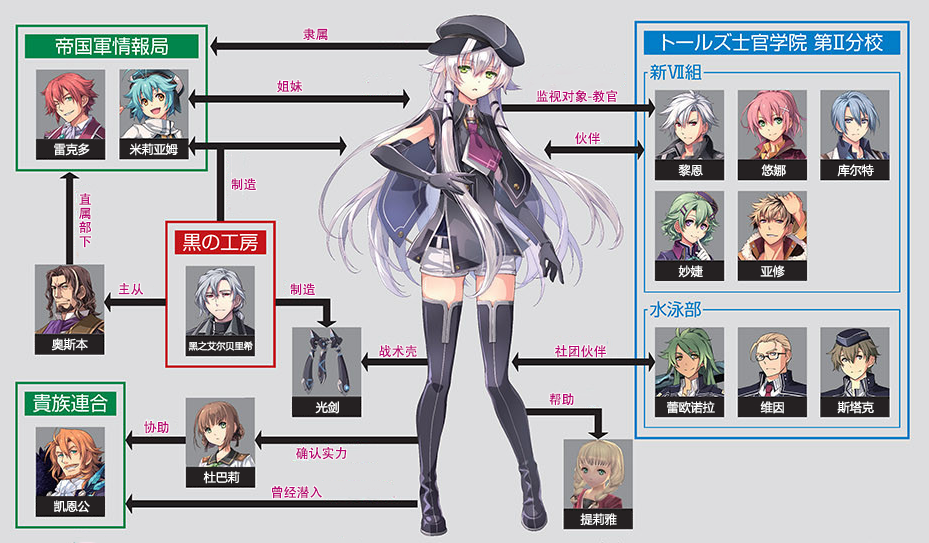
<style>
.page{position:relative;width:929px;height:543px;background:#dddddf}
.page>*{position:absolute;margin:0}
.t1{font:13px "AdobeHeitiStd-Regular";color:#b70773}
.t2{font:12px "MicrosoftYaHei";color:#ffffff}
.t3{font:13px/14px "AdobeHeitiStd-Regular";color:#b70773}
.t4{font:9.2px "MicrosoftYaHei";color:#ffffff}
</style>
<div class="page">
<p class="t1" style="left:303px;top:28px;width:25px;height:13px">隶属</p>
<p class="t1" style="left:277px;top:80px;width:26px;height:13px">姐妹</p>
<p class="t1" style="left:536px;top:90px;width:82px;height:13px">监视对象-教官</p>
<p class="t1" style="left:575px;top:132px;width:25px;height:13px">伙伴</p>
<p class="t2" style="left:54px;top:143px;width:36px;height:13px">雷克多</p>
<p class="t2" style="left:129px;top:143px;width:49px;height:13px">米莉亚姆</p>
<p class="t2" style="left:678px;top:164px;width:25px;height:13px">黎恩</p>
<p class="t2" style="left:761px;top:164px;width:25px;height:13px">悠娜</p>
<p class="t2" style="left:837px;top:164px;width:37px;height:13px">库尔特</p>
<p class="t1" style="left:231px;top:178px;width:26px;height:13px">制造</p>
<p class="t3" style="left:79px;top:193px;width:13px;height:55px">直<br>属<br>部<br>下</p>
<p class="t2" style="left:678px;top:265px;width:25px;height:13px">妙婕</p>
<p class="t2" style="left:760px;top:265px;width:25px;height:13px">亚修</p>
<p class="t1" style="left:118px;top:283px;width:26px;height:13px">主从</p>
<p class="t1" style="left:290px;top:283px;width:26px;height:13px">制造</p>
<p class="t2" style="left:51px;top:338px;width:37px;height:13px">奥斯本</p>
<p class="t4" style="left:188px;top:341px;width:65px;height:10px">黑之艾尔贝里希</p>
<p class="t1" style="left:379px;top:345px;width:38px;height:13px">战术壳</p>
<p class="t1" style="left:555px;top:345px;width:51px;height:13px">社团伙伴</p>
<p class="t2" style="left:315px;top:401px;width:24px;height:13px">光剑</p>
<p class="t1" style="left:549px;top:393px;width:25px;height:13px">帮助</p>
<p class="t2" style="left:667px;top:401px;width:48px;height:13px">蕾欧诺拉</p>
<p class="t2" style="left:760px;top:401px;width:24px;height:13px">维因</p>
<p class="t2" style="left:837px;top:401px;width:37px;height:13px">斯塔克</p>
<p class="t1" style="left:144px;top:421px;width:25px;height:13px">协助</p>
<p class="t1" style="left:296px;top:447px;width:51px;height:13px">确认实力</p>
<p class="t2" style="left:203px;top:471px;width:37px;height:13px">杜巴莉</p>
<p class="t1" style="left:272px;top:486px;width:50px;height:13px">曾经潜入</p>
<p class="t2" style="left:54px;top:500px;width:36px;height:13px">凯恩公</p>
<p class="t2" style="left:580px;top:513px;width:37px;height:13px">提莉雅</p>
</div>
